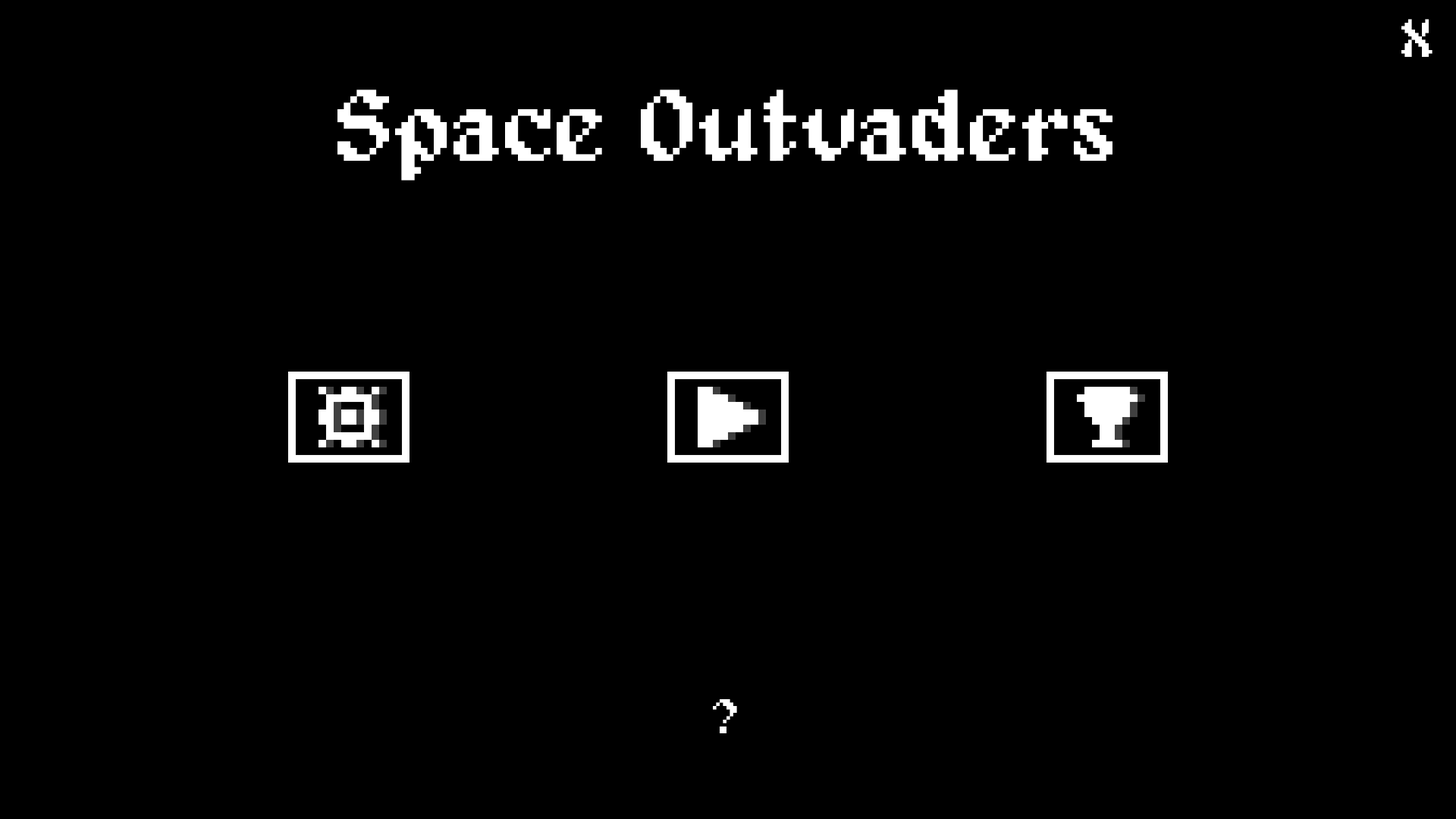
<style>
.page{position:relative;width:1456px;height:819px;background:#000000}
.page>*{position:absolute;margin:0}
.t1{font:54.6px "Alagard";color:#ffffff}
.t2{font:103.3px "Alagard";color:#ffffff}
</style>
<div class="page">
<p class="t1" style="left:1401px;top:19px;width:31px;height:38px">X</p>
<p class="t2" style="left:337px;top:89px;width:775px;height:91px">Space Outvaders</p>
<p class="t1" style="left:713px;top:699px;width:24px;height:34px">?</p>
</div>
